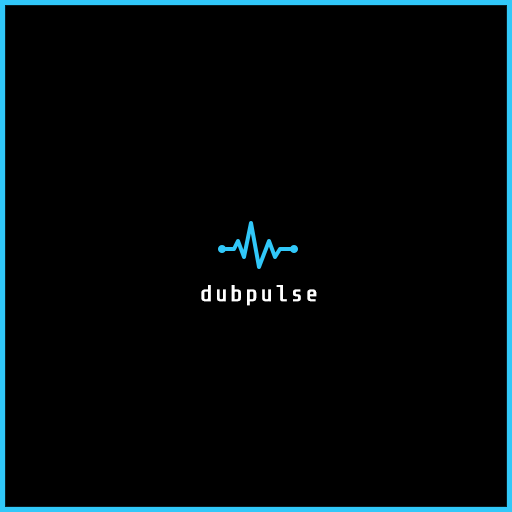
<style>
.page{position:relative;width:512px;height:512px;background:#000000}
.page>*{position:absolute;margin:0}
.t1{font:23px "ShareTechMono-Regular";letter-spacing:0.09em;color:#ffffff;font-weight:bold}
</style>
<div class="page">
<p class="t1" style="left:201px;top:285px;width:116px;height:21px">dubpulse</p>
</div>
